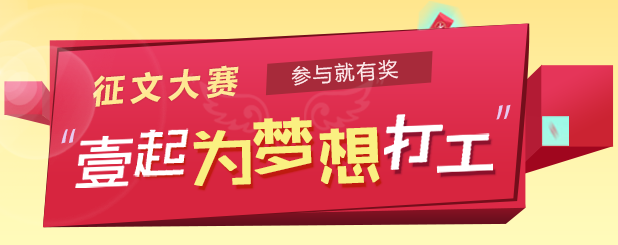
<style>
.page{position:relative;width:618px;height:245px}
.page>*{position:absolute;margin:0}
.t1{font:32px "MicrosoftYaHei-Bold";letter-spacing:0.2em;color:#ffe791;font-style:italic}
.t2{font:19.8px "MicrosoftYaHei";letter-spacing:0.1em;color:#f1eeee}
.t3{font:62.5px "ZHSCNMT--GBK1-0";color:#e7c9f0}
.t4{font:67px "ZHSCNMT--GBK1-0";color:#faf081;font-weight:bold}
</style>
<div class="page">
<p class="t1" style="left:93px;top:65px;width:146px;height:42px;rotate:-5deg">征文大赛</p>
<p class="t2" style="left:291px;top:59px;width:108px;height:27px;rotate:-4deg">参与就有奖</p>
<p class="t3" style="left:496px;top:104px;width:15px;height:16px;rotate:-2deg">”</p>
<p class="t4" style="left:253px;top:117px;width:60px;height:58px;rotate:-2deg">梦</p>
<p class="t3" style="left:61px;top:128px;width:15px;height:16px;rotate:-2deg">“</p>
<p class="t4" style="left:193px;top:130px;width:58px;height:56px;rotate:-2deg">为</p>
<p class="t4" style="left:319px;top:127px;width:61px;height:57px;rotate:-2deg">想</p>
</div>
